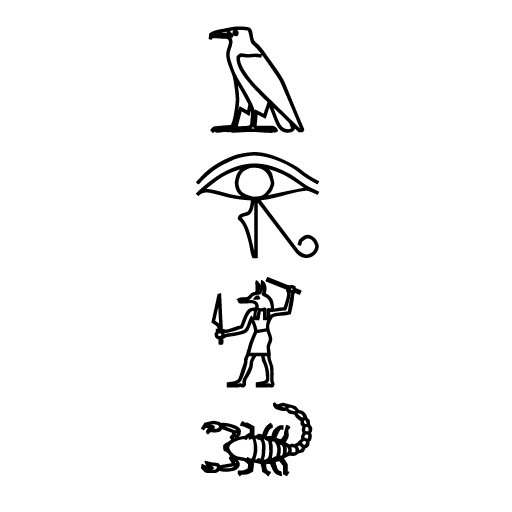
<style>
.page{position:relative;width:512px;height:512px;background:#ffffff}
.page>*{position:absolute;margin:0}
.t1{font:114px "AegyptusBold";letter-spacing:0.1em;color:#000000;font-weight:bold}
</style>
<div class="page">
<p class="t1" style="left:208px;top:26px;width:97px;height:107px">𓄿</p>
<p class="t1" style="left:196px;top:152px;width:124px;height:107px">𓂀</p>
<p class="t1" style="left:211px;top:277px;width:91px;height:111px">󳒞</p>
<p class="t1" style="left:201px;top:402px;width:112px;height:75px">󳻗</p>
</div>
